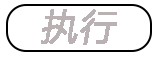
<style>
.page{position:relative;width:160px;height:60px;background:#ffffff}
.page>*{position:absolute;margin:0}
.t1{font:36px "MicrosoftYaHei";color:#bab2b2;font-weight:bold;font-style:italic}
</style>
<div class="page">
<p class="t1" style="left:41px;top:9px;width:76px;height:36px">执行</p>
</div>
